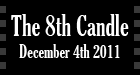
<style>
.page{position:relative;width:140px;height:75px;background:#000000}
.page>*{position:absolute;margin:0}
.t1{font:18px "GloucesterMT-ExtraCondensed";color:#ffffff}
.t2{font:28px "GloucesterMT-ExtraCondensed";color:#ffffff}
</style>
<div class="page">
<p class="t1" style="left:11px;top:14px;width:118px;height:44px;text-align:center"><span class="t2">The 8th Candle<br></span>December 4th 2011</p>
</div>
